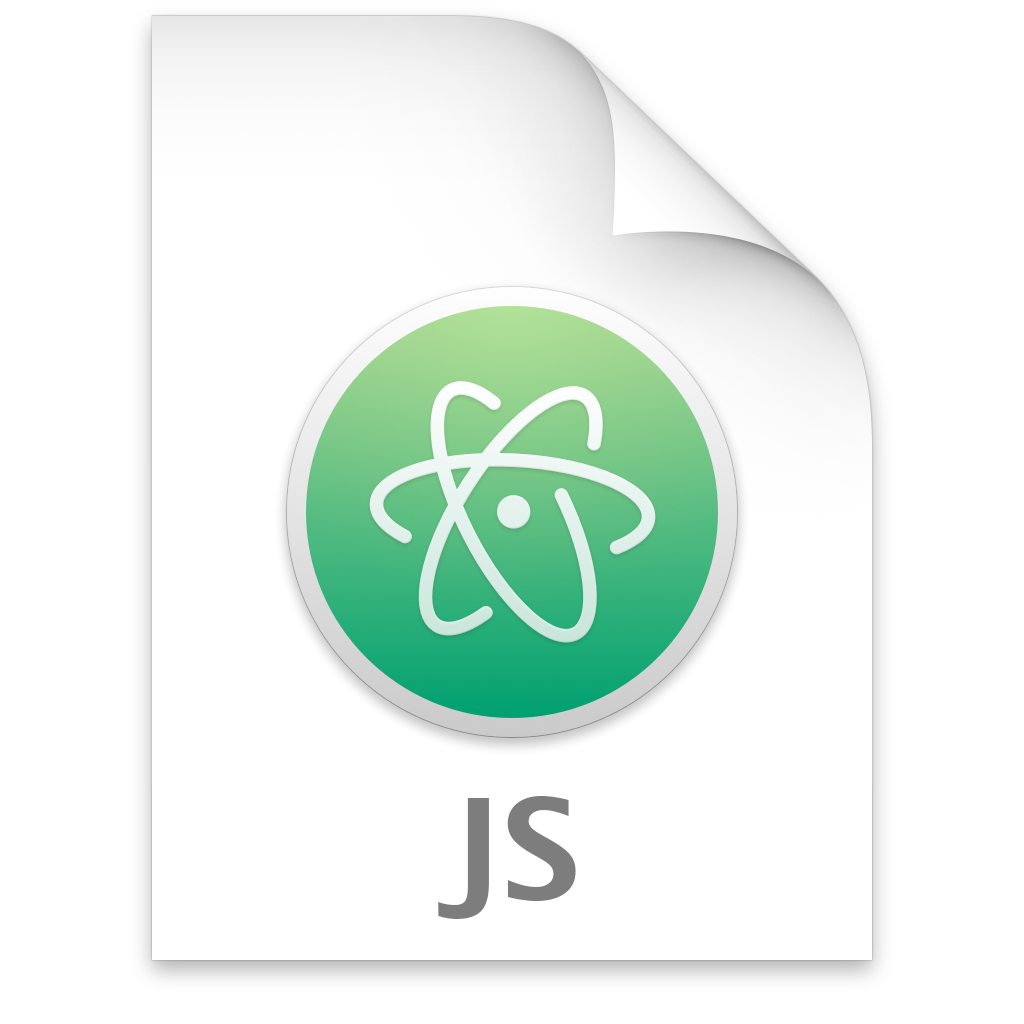
<style>
.page{position:relative;width:1024px;height:1024px;background:#ffffff}
.page>*{position:absolute;margin:0}
.t1{font:140px "LucidaGrande-Bold";color:#7d7d7d}
</style>
<div class="page">
<p class="t1" style="left:438px;top:796px;width:138px;height:123px">JS</p>
</div>
